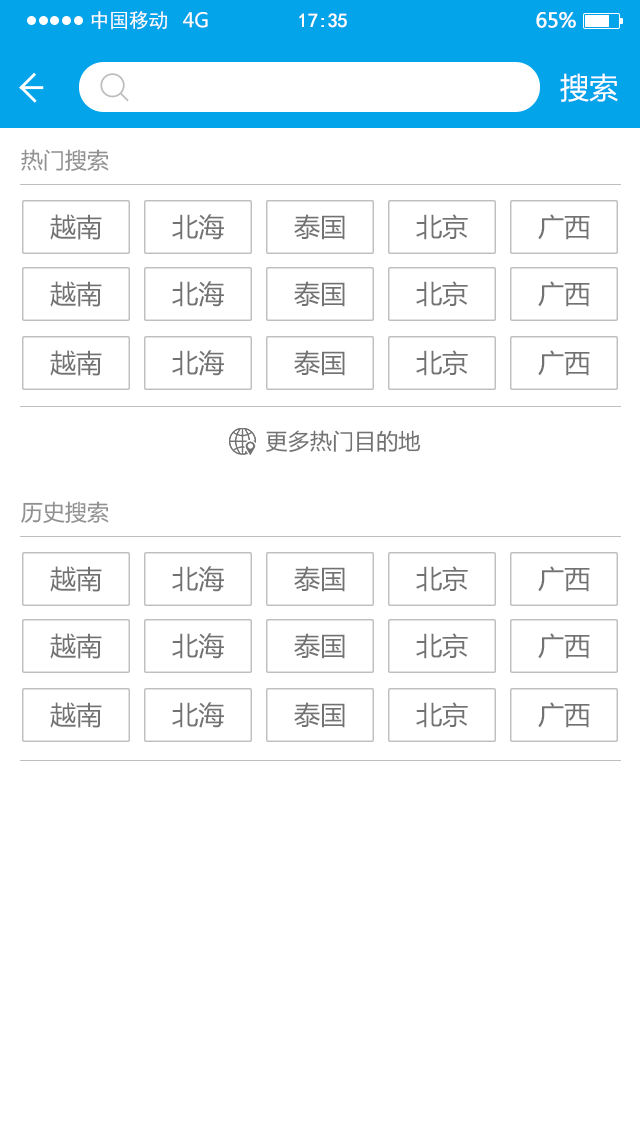
<style>
.page{position:relative;width:640px;height:1138px;background:#ffffff}
.page>*{position:absolute;margin:0}
.t1{font:19.7px "MicrosoftYaHei";letter-spacing:-0.022em;color:#ffffff;font-weight:bold}
.t2{font:29.1px "MicrosoftYaHei";color:#ffffff}
.t3{font:22px "MicrosoftYaHei";color:#919191}
.t4{font:26px "MicrosoftYaHei";color:#727272}
.t5{font:22px "MicrosoftYaHei";color:#727272}
</style>
<div class="page">
<p class="t1" style="left:536px;top:12px;width:40px;height:16px">65%</p>
<p class="t2" style="left:560px;top:73px;width:58px;height:29px">搜索</p>
<p class="t3" style="left:21px;top:149px;width:88px;height:22px">热门搜索</p>
<p class="t4" style="left:50px;top:214px;width:52px;height:26px">越南</p>
<p class="t4" style="left:172px;top:214px;width:52px;height:26px">北海</p>
<p class="t4" style="left:294px;top:214px;width:51px;height:26px">泰国</p>
<p class="t4" style="left:416px;top:214px;width:52px;height:26px">北京</p>
<p class="t4" style="left:538px;top:214px;width:52px;height:26px">广西</p>
<p class="t4" style="left:50px;top:281px;width:52px;height:26px">越南</p>
<p class="t4" style="left:172px;top:281px;width:52px;height:26px">北海</p>
<p class="t4" style="left:294px;top:281px;width:51px;height:26px">泰国</p>
<p class="t4" style="left:416px;top:281px;width:52px;height:26px">北京</p>
<p class="t4" style="left:538px;top:281px;width:52px;height:26px">广西</p>
<p class="t4" style="left:50px;top:350px;width:52px;height:26px">越南</p>
<p class="t4" style="left:172px;top:350px;width:52px;height:26px">北海</p>
<p class="t4" style="left:294px;top:350px;width:51px;height:26px">泰国</p>
<p class="t4" style="left:416px;top:350px;width:52px;height:26px">北京</p>
<p class="t4" style="left:538px;top:350px;width:52px;height:26px">广西</p>
<p class="t5" style="left:266px;top:430px;width:155px;height:23px">更多热门目的地</p>
<p class="t3" style="left:21px;top:501px;width:88px;height:22px">历史搜索</p>
<p class="t4" style="left:50px;top:566px;width:52px;height:26px">越南</p>
<p class="t4" style="left:172px;top:566px;width:52px;height:26px">北海</p>
<p class="t4" style="left:294px;top:566px;width:51px;height:26px">泰国</p>
<p class="t4" style="left:416px;top:566px;width:52px;height:26px">北京</p>
<p class="t4" style="left:294px;top:633px;width:51px;height:26px">泰国</p>
<p class="t4" style="left:416px;top:633px;width:52px;height:26px">北京</p>
<p class="t4" style="left:294px;top:702px;width:51px;height:26px">泰国</p>
<p class="t4" style="left:416px;top:702px;width:52px;height:26px">北京</p>
<p class="t4" style="left:538px;top:702px;width:52px;height:26px">广西</p>
</div>
